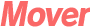
<style>
.page{position:relative;width:90px;height:28px;background:#ffffff}
.page>*{position:absolute;margin:0}
.t1{font:32px "RodinPro-EB";letter-spacing:-0.051em;color:#fa6867;font-style:italic;scale:0.94 1}
</style>
<div class="page">
<p class="t1" style="left:0px;top:1px;width:92px;height:26px">Mover</p>
</div>
